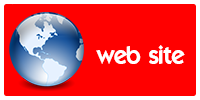
<style>
.page{position:relative;width:200px;height:100px;background:#ff0000}
.page>*{position:absolute;margin:0}
.t1{font:24px "ELEGANCE";color:#ffffff}
</style>
<div class="page">
<p class="t1" style="left:96px;top:45px;width:89px;height:19px">web site</p>
</div>
